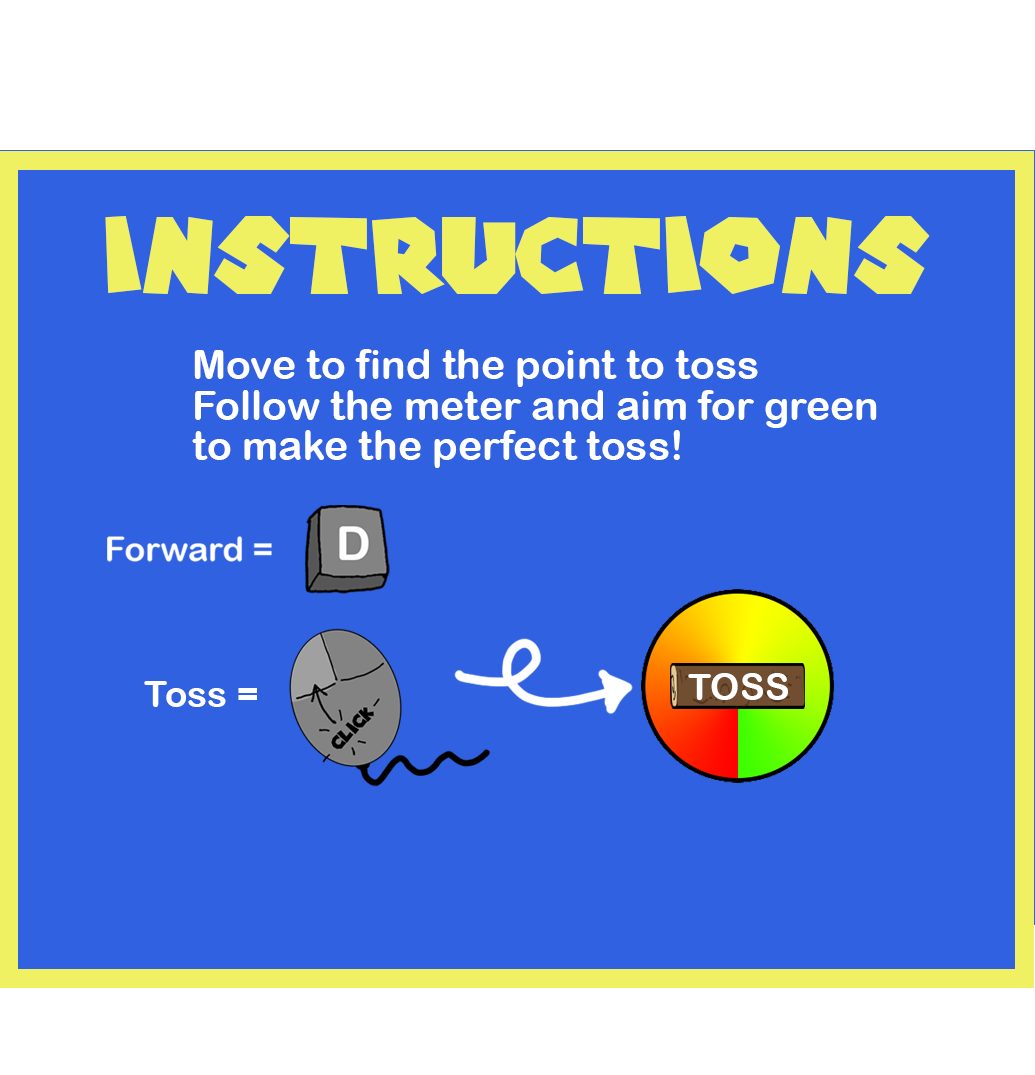
<style>
.page{position:relative;width:1035px;height:1075px;background:#2f61e1}
.page>*{position:absolute;margin:0}
.t1{font:104.1px "SuperMarioGalaxy";color:#eff163}
.t2{font:40.9px/40.9px "ArialRoundedMTBold";color:#ffffff}
.t3{font:37.2px "ArialRoundedMTBold";color:#ffffff}
</style>
<div class="page">
<p class="t1" style="left:105px;top:216px;width:825px;height:78px">Instructions</p>
<p class="t2" style="left:192px;top:349px;width:685px;height:119px">Move to find the point to toss<br>Follow the meter and aim for green <br>to make the perfect toss!</p>
<p class="t3" style="left:688px;top:673px;width:100px;height:27px">TOSS</p>
<p class="t3" style="left:144px;top:681px;width:113px;height:26px">Toss =</p>
</div>
